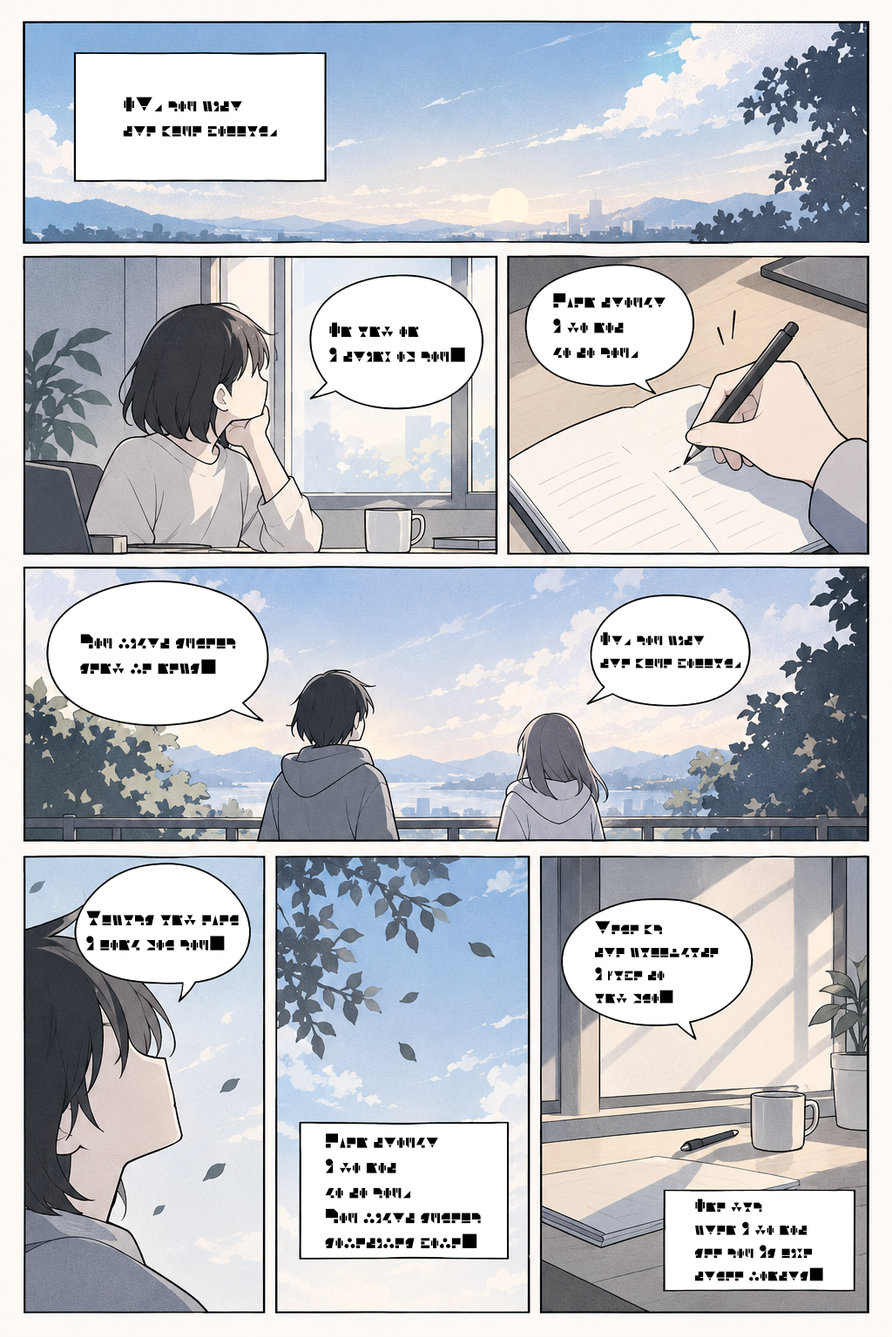
<style>
.page{position:relative;width:892px;height:1337px}
.page>*{position:absolute;margin:0}
.t1{font:20.9px "EndfieldByButan";color:#000000}
.t2{font:19.2px "EndfieldByButan";color:#000000}
</style>
<div class="page">
<p class="t1" style="left:123px;top:97px;width:154px;height:40px">OH, you with <br>the blue collar,</p>
<p class="t1" style="left:552px;top:293px;width:113px;height:66px">Even though <br>I do not <br>go to you,</p>
<p class="t1" style="left:329px;top:322px;width:136px;height:40px">On and on <br>I think of you.</p>
<p class="t1" style="left:80px;top:634px;width:156px;height:40px">You might surely <br>send me news.</p>
<p class="t2" style="left:600px;top:632px;width:141px;height:37px">Oh, you with <br>the blue collar,</p>
<p class="t1" style="left:86px;top:911px;width:153px;height:40px">Always and ever <br>I long for you.</p>
<p class="t2" style="left:595px;top:921px;width:123px;height:83px">Here by <br>the wall-gate <br>I pace to <br>and fro.</p>
<p class="t1" style="left:325px;top:1134px;width:156px;height:115px">Even though <br>I do not <br>go to you, <br>You might surely <br>sometimes come.</p>
<p class="t2" style="left:695px;top:1199px;width:128px;height:83px">One day <br>when I do not <br>see you Is like <br>three months.</p>
</div>
